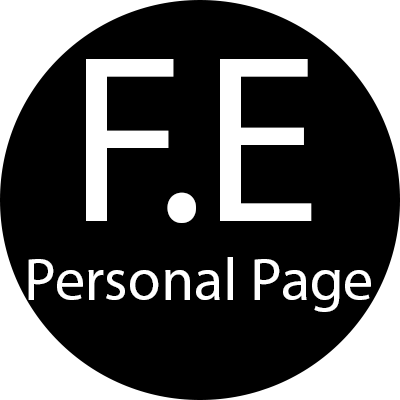
<style>
.page{position:relative;width:400px;height:400px;background:#000000}
.page>*{position:absolute;margin:0}
.t1{font:240.4px "MyriadPro-Regular";color:#ffffff}
.t2{font:60px "MyriadPro-Regular";color:#ffffff}
</style>
<div class="page">
<p class="t1" style="left:86px;top:59px;width:226px;height:164px">F.E</p>
<p class="t2" style="left:28px;top:257px;width:343px;height:55px">Personal Page</p>
</div>
